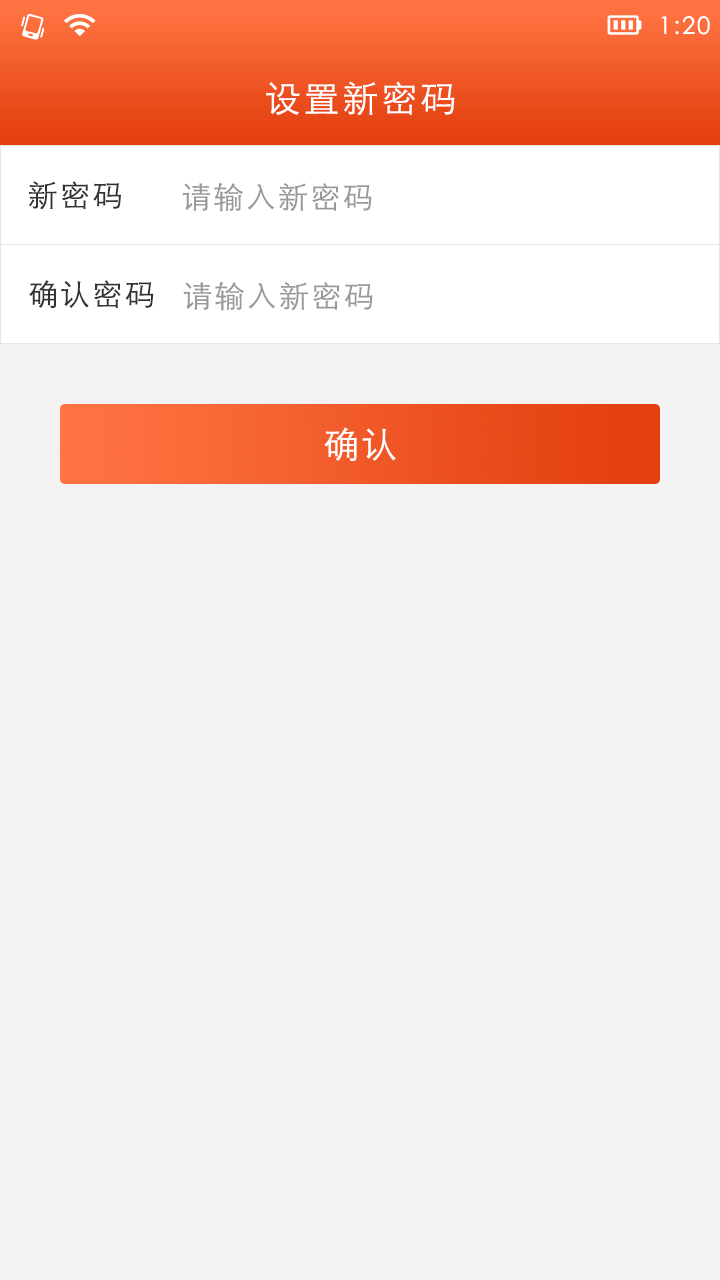
<style>
.page{position:relative;width:720px;height:1280px;background:#f2f2f2}
.page>*{position:absolute;margin:0}
.t1{font:24px "STXihei";letter-spacing:0.075em;color:#ffffff}
.t2{font:36px "STHeitiSC-Light";letter-spacing:0.075em;color:#ffffff}
.t3{font:30px "STHeitiSC-Light";letter-spacing:0.075em;color:#333333}
.t4{font:30px "STHeitiSC-Light";letter-spacing:0.075em;color:#999999}
</style>
<div class="page">
<p class="t1" style="left:661px;top:16px;width:49px;height:19px">1:20</p>
<p class="t2" style="left:266px;top:81px;width:189px;height:34px">设置新密码</p>
<p class="t3" style="left:29px;top:181px;width:92px;height:29px">新密码</p>
<p class="t4" style="left:182px;top:183px;width:190px;height:29px">请输入新密码</p>
<p class="t3" style="left:29px;top:280px;width:125px;height:28px">确认密码</p>
<p class="t4" style="left:183px;top:282px;width:190px;height:29px">请输入新密码</p>
<p class="t2" style="left:324px;top:427px;width:72px;height:34px">确认</p>
</div>
